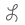
<style>
.page{position:relative;width:25px;height:25px;background:#ffffff}
.page>*{position:absolute;margin:0}
.t1{font:22.4px "GiddyupStd";color:#555555;scale:0.97 1}
</style>
<div class="page">
<p class="t1" style="left:6px;top:4px;width:12px;height:18px">L</p>
</div>
